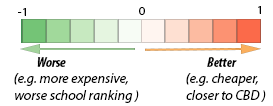
<style>
.page{position:relative;width:273px;height:106px;background:#ffffff}
.page>*{position:absolute;margin:0}
.t1{font:12px "MyriadPro-Regular";color:#000000}
.t2{font:14px "MyriadPro-BoldCondIt";color:#000000}
.t3{font:14px "MyriadPro-It";color:#000000}
</style>
<div class="page">
<p class="t1" style="left:258px;top:6px;width:3px;height:8px">1</p>
<p class="t1" style="left:18px;top:8px;width:8px;height:8px">-1</p>
<p class="t1" style="left:139px;top:7px;width:6px;height:8px">0</p>
<p class="t2" style="left:37px;top:57px;width:29px;height:10px">Worse</p>
<p class="t2" style="left:207px;top:57px;width:30px;height:10px">Better</p>
<p class="t3" style="left:14px;top:73px;width:125px;height:30px"><span class="t2">(</span>e.g. more expensive, <br>worse school ranking )</p>
<p class="t3" style="left:186px;top:73px;width:80px;height:29px"><span class="t2">(</span>e.g. cheaper,<br>closer to CBD )</p>
</div>
